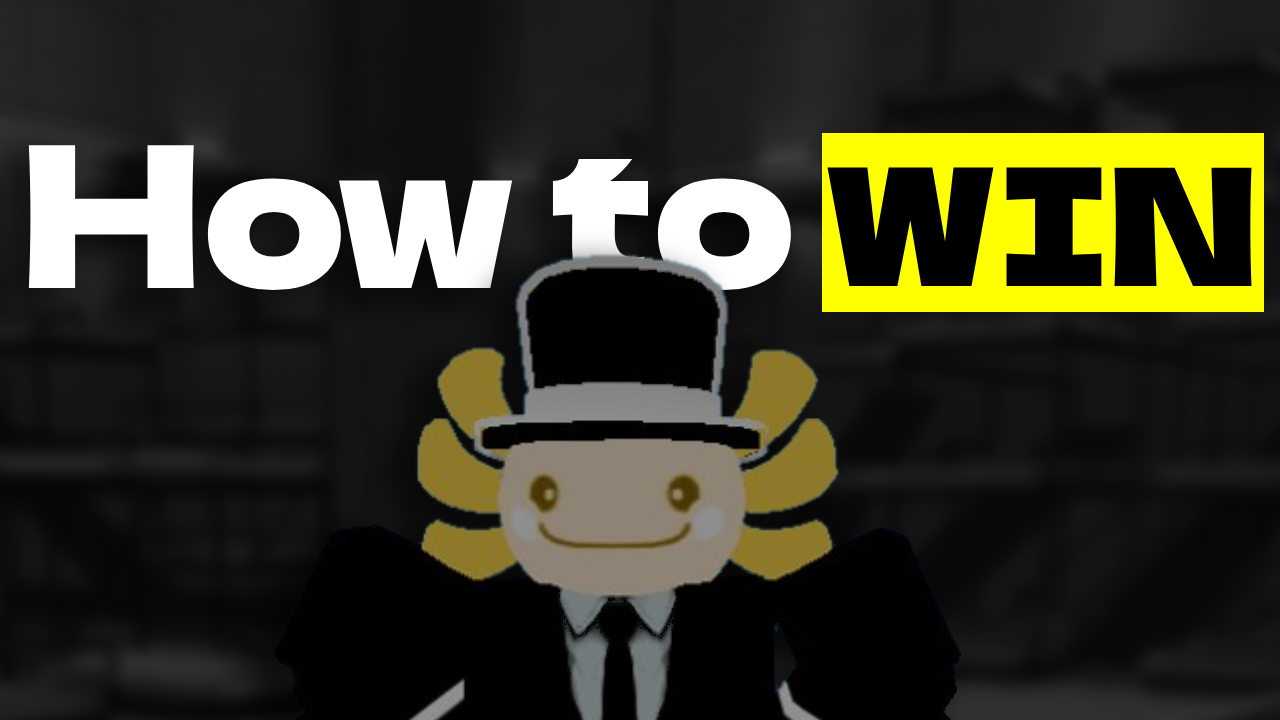
<style>
.page{position:relative;width:1280px;height:720px}
.page>*{position:absolute;margin:0}
.t1{font:196.8px "DelaGothicOne-Regular";color:#ffffff}
.t2{font:163.2px "DelaGothicOne-Regular";color:#000000}
</style>
<div class="page">
<p class="t1" style="left:28px;top:145px;width:763px;height:145px">How to</p>
<p class="t2" style="left:827px;top:167px;width:425px;height:120px">WIN</p>
</div>
